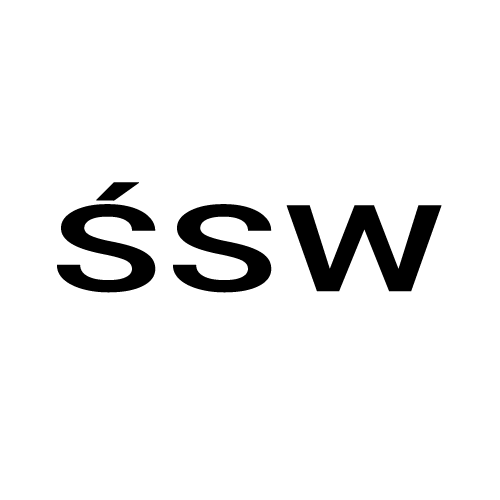
<style>
.page{position:relative;width:500px;height:500px;background:#ffffff}
.page>*{position:absolute;margin:0}
.t1{font:120px "Roboto-Medium";color:#000000;font-weight:bold;scale:1.53 1}
</style>
<div class="page">
<p class="t1" style="left:57px;top:182px;width:385px;height:111px">ŚSW</p>
</div>
